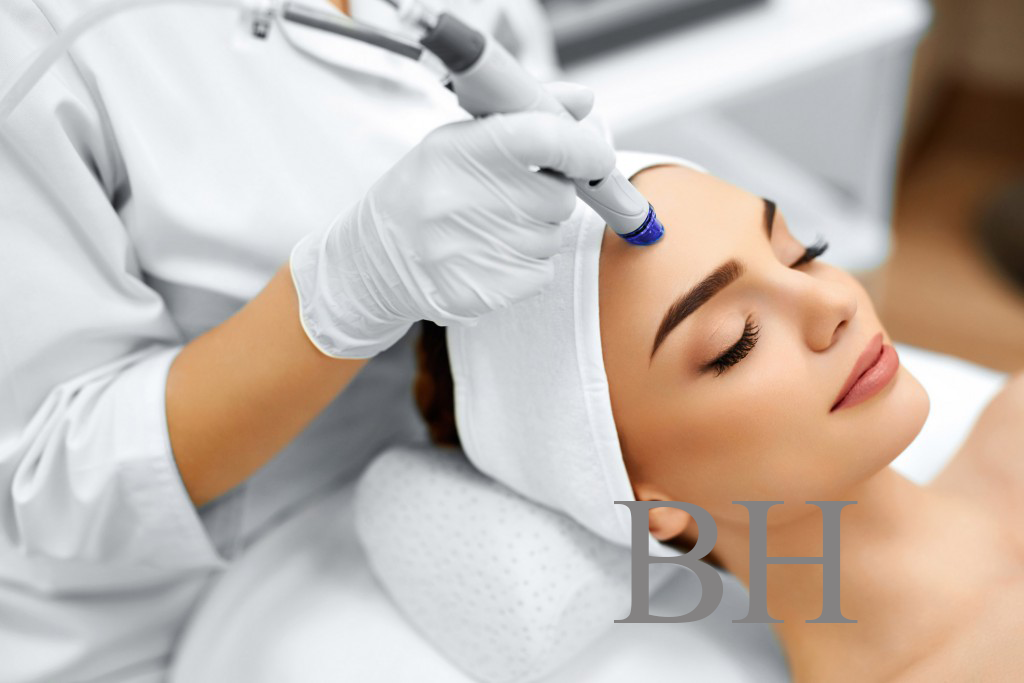
<style>
.page{position:relative;width:1024px;height:683px}
.page>*{position:absolute;margin:0}
.t1{font:183.7px "TimesNewRomanPSMT";letter-spacing:-0.02em;color:#848282}
</style>
<div class="page">
<p class="t1" style="left:614px;top:501px;width:244px;height:122px">BH</p>
</div>
